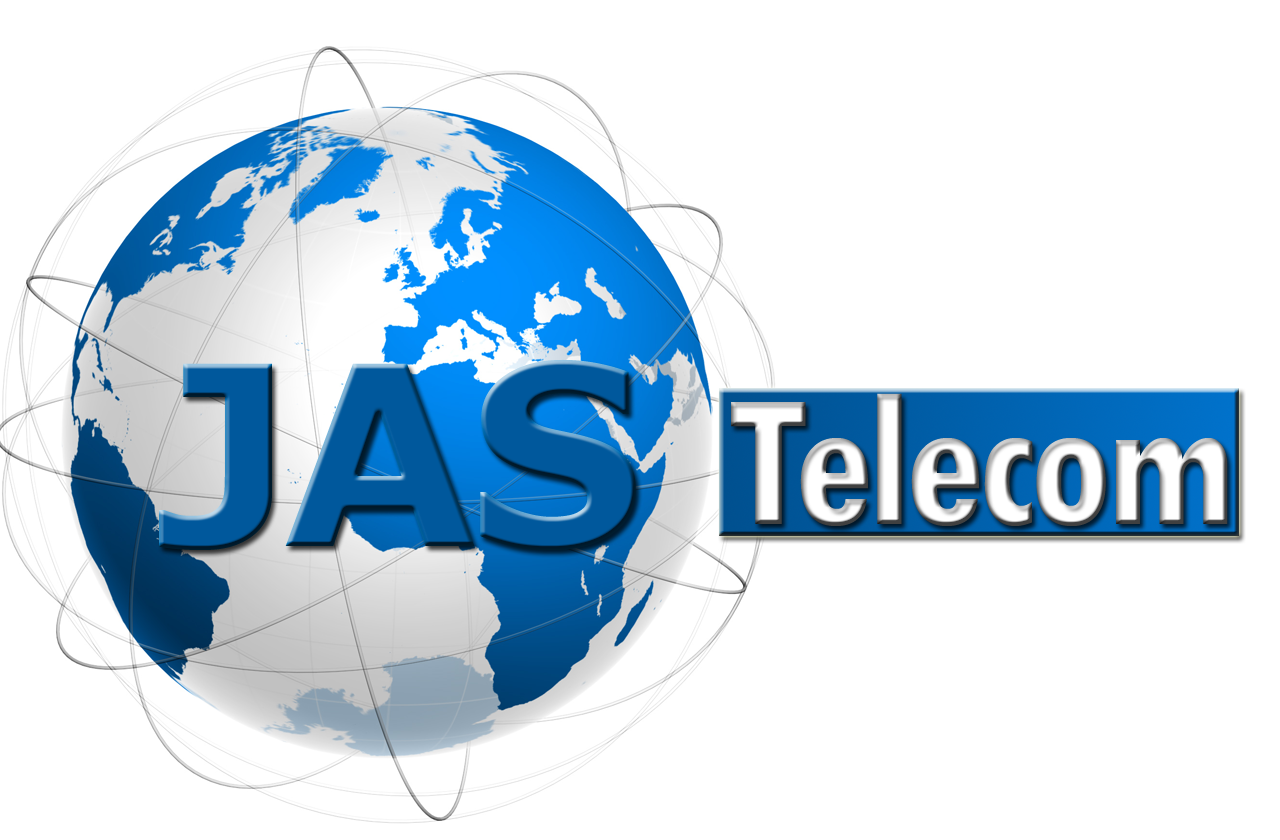
<style>
.page{position:relative;width:1280px;height:840px;background:#ffffff}
.page>*{position:absolute;margin:0}
.t1{font:250px "Verdana-Bold";letter-spacing:-0.04em;color:#00589c}
.t2{font:200px "TwCenMT-CondensedBold";letter-spacing:-0.04em}
</style>
<div class="page">
<p class="t1" style="left:159px;top:359px;width:477px;height:191px">JAS</p>
<p class="t2" style="left:731px;top:393px;width:497px;height:133px">Telecom</p>
</div>
